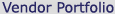
<style>
.page{position:relative;width:115px;height:14px;background:#dedede}
.page>*{position:absolute;margin:0}
.t1{font:14px "Verdana";color:#292765}
</style>
<div class="page">
<p class="t1" style="left:2px;top:1px;width:112px;height:12px">Vendor Portfolio</p>
</div>
